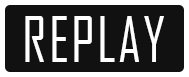
<style>
.page{position:relative;width:189px;height:77px;background:#111111}
.page>*{position:absolute;margin:0}
.t1{font:60px "AgencyFB-Reg";letter-spacing:0.04em;color:#ffffff;scale:0.95 1}
</style>
<div class="page">
<p class="t1" style="left:25px;top:16px;width:139px;height:46px">REPLAY</p>
</div>
